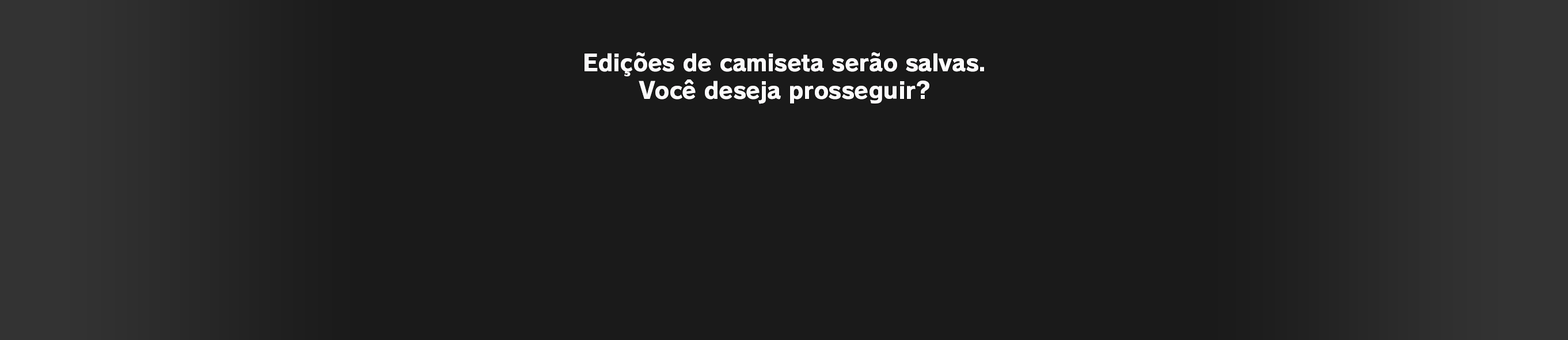
<style>
.page{position:relative;width:1568px;height:340px;background:#1a1a1a}
.page>*{position:absolute;margin:0}
.t1{font:23px "RodinPro-EB";letter-spacing:-0.015em;color:#fbfafb}
</style>
<div class="page">
<p class="t1" style="left:584px;top:52px;width:400px;height:25px">Edições de camiseta serão salvas.</p>
<p class="t1" style="left:639px;top:79px;width:290px;height:25px">Você deseja prosseguir?</p>
</div>
